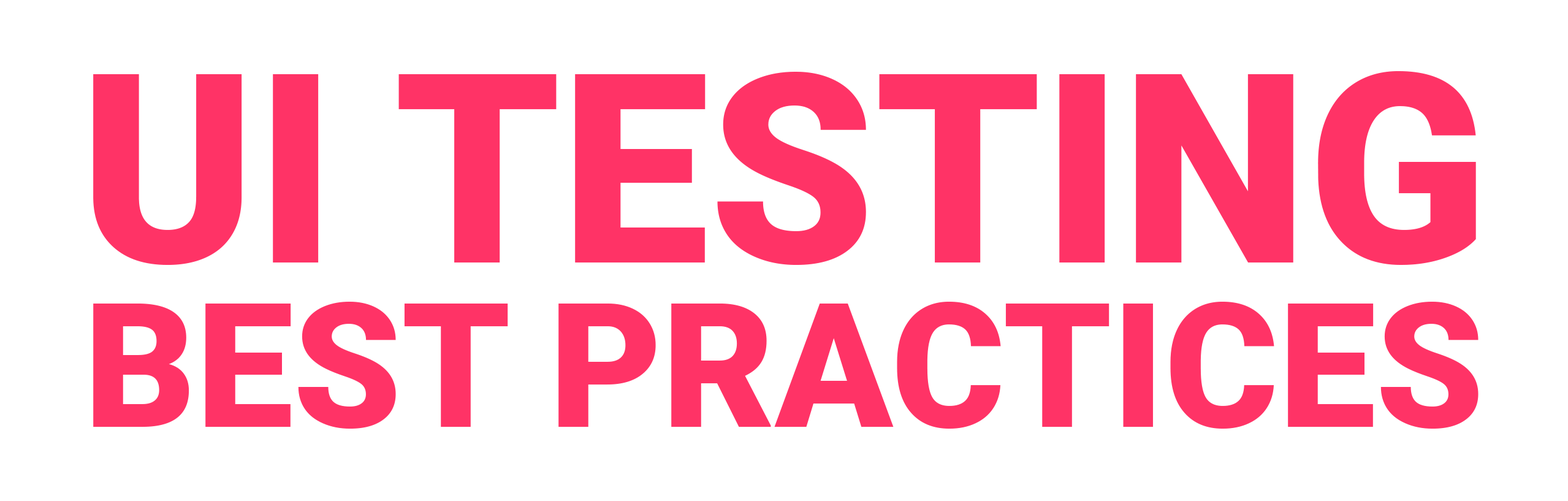
<style>
.page{position:relative;width:1568px;height:501px;background:#ffffff}
.page>*{position:absolute;margin:0}
.t1{font:173.5px/164.3px "Roboto-Black";color:#ff3366}
.t2{font:264.8px/164.3px "Roboto-Black";color:#ff3366}
</style>
<div class="page">
<p class="t1" style="left:93px;top:71px;width:1386px;height:357px;text-align:center"><span class="t2">UI TESTING<br></span>BEST PRACTICES</p>
</div>
